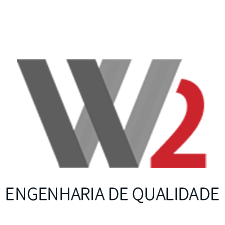
<style>
.page{position:relative;width:225px;height:225px;background:#ffffff}
.page>*{position:absolute;margin:0}
.t1{font:18.4px "SourceSansRoman-Light";color:#040f1a;text-transform:uppercase;font-weight:bold}
</style>
<div class="page">
<p class="t1" style="left:6px;top:187px;width:213px;height:16px">Engenharia DE QUALIDADE</p>
</div>
